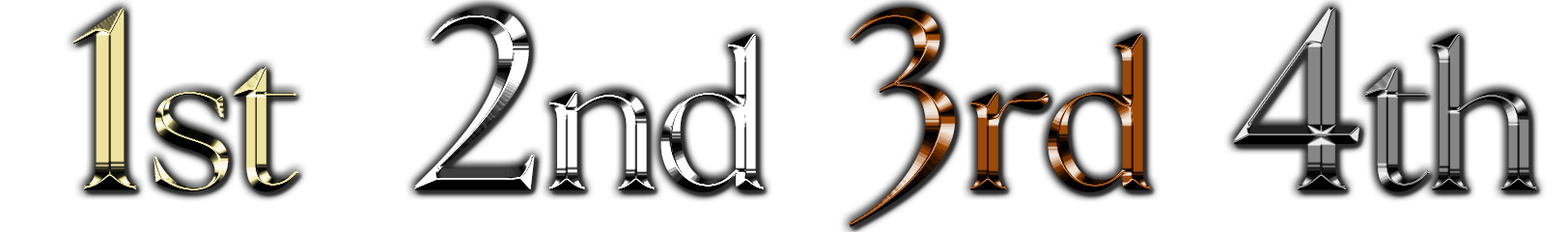
<style>
.page{position:relative;width:1568px;height:232px;background:#ffffff}
.page>*{position:absolute;margin:0}
.t1{font:193.1px "TheSeasons-Bold"}
.t2{font:257.5px "TheSeasons-Bold"}
</style>
<div class="page">
<p class="t1" style="left:72px;top:7px;width:1465px;height:220px"><span class="t2">1</span>st   <span class="t2">2</span>nd  <span class="t2">3</span>rd  <span class="t2">4</span>th</p>
</div>
